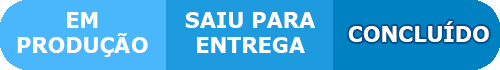
<style>
.page{position:relative;width:500px;height:70px;background:#4ab6fb}
.page>*{position:absolute;margin:0}
.t1{font:20.8px "Verdana-Bold";color:#ffffff}
</style>
<div class="page">
<p class="t1" style="left:17px;top:12px;width:131px;height:45px;text-align:center">EM<br>PRODUÇÃO</p>
<p class="t1" style="left:185px;top:12px;width:130px;height:41px;text-align:center">SAIU PARA<br>ENTREGA</p>
<p class="t1" style="left:348px;top:21px;width:141px;height:21px">CONCLUÍDO</p>
</div>
